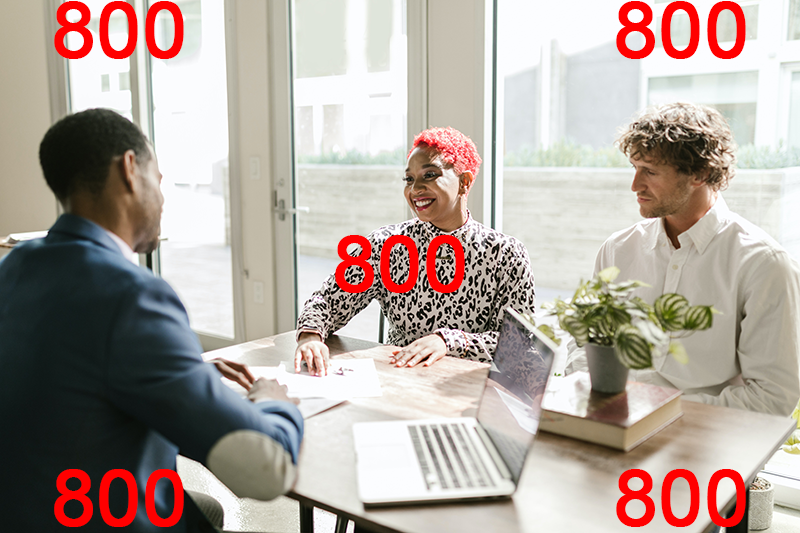
<style>
.page{position:relative;width:800px;height:533px}
.page>*{position:absolute;margin:0}
.t1{font:77.8px "ArialMT";color:#ff0000;font-weight:bold}
</style>
<div class="page">
<p class="t1" style="left:54px;top:1px;width:130px;height:58px">800</p>
<p class="t1" style="left:616px;top:1px;width:130px;height:58px">800</p>
<p class="t1" style="left:335px;top:235px;width:130px;height:58px">800</p>
<p class="t1" style="left:54px;top:469px;width:130px;height:58px">800</p>
<p class="t1" style="left:616px;top:469px;width:130px;height:58px">800</p>
</div>
